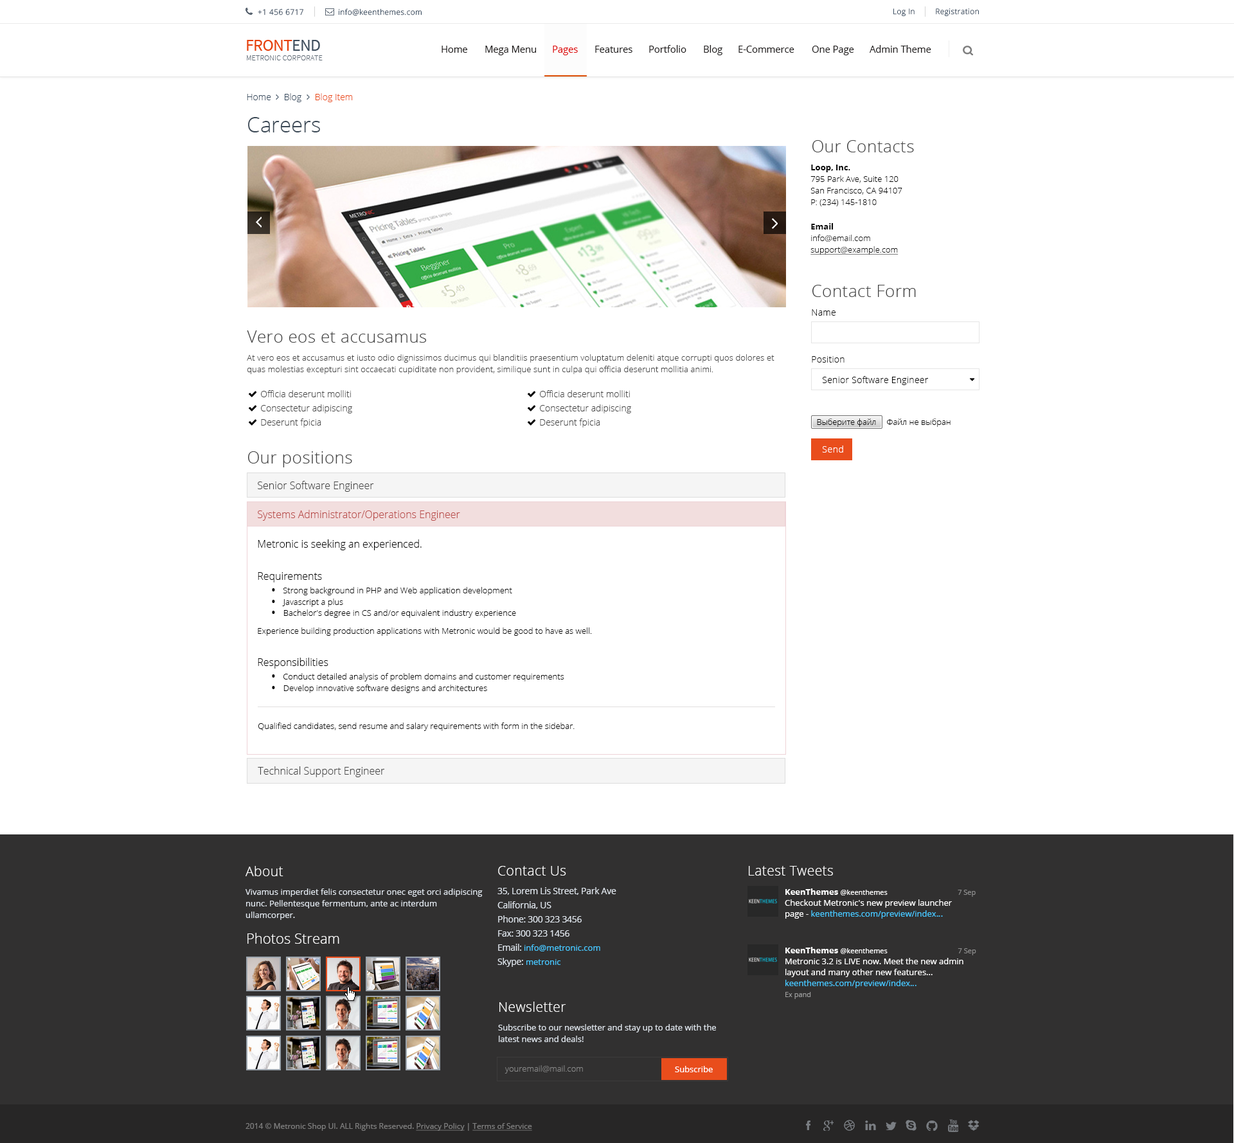
<style>
.page{position:relative;width:1234px;height:1143px;background:#ffffff}
.page>*{position:absolute;margin:0}
.t1{font:7.7px "OpenSans-Light";letter-spacing:0.04em;color:#394c60}
.t2{font:9.4px "OpenSans";color:#1f1c1c}
.t3{font:9.4px "OpenSans";color:#dd0000}
.t4{font:9px "OpenSans-Light";color:#394c60}
.t5{font:9px "OpenSans-Light";color:#e94d1c}
.t6{font:21.2px "OpenSans-Light";color:#3a4855}
.t7{font:16.7px "OpenSans-Light";letter-spacing:0.02em;color:#444444}
.t8{font:8.4px/11.6px "OpenSans-Light";color:#000000}
.t9{font:8.4px/11.6px "OpenSans-Bold";color:#000000}
.t10{font:8.4px/11.6px "OpenSans-Light";color:#0f0f0f;text-decoration:underline}
.t11{font:8.4px/11.6px "OpenSans-Bold";color:#0f0f0f}
.t12{font:8.4px/11.6px "OpenSans-Light";color:#0f0f0f}
.t13{font:9px "OpenSans-Light";letter-spacing:0.02em;color:#000000}
.t14{font:8.4px/11.6px "OpenSans-Light";letter-spacing:0.01em;color:#444444}
.t15{font:9px/14.1px "OpenSans-Light";color:#444444}
.t16{font:8.4px "OpenSans-Light";letter-spacing:-0.01em;color:#000000}
.t17{font:8.4px "OpenSans-Light";color:#000000}
.t18{font:9px "OpenSans-Light";letter-spacing:0.04em;color:#ffffff}
.t19{font:10.3px "OpenSans-Light";color:#444444}
.t20{font:10.3px "OpenSans-Light";color:#b94a48}
.t21{font:8.4px/7.5px "OpenSans-Light";color:#000000}
.t22{font:10.3px "OpenSans-Light";color:#000000}
.t23{font:10.3px/15.4px "OpenSans-Light";color:#000000}
.t24{font:16.7px/3.7px "OpenSans-Light";color:#000000}
.t25{font:8.4px/2.4px "OpenSans-Light";color:#000000}
.t26{font:16.7px/7.7px "OpenSans-Light";color:#000000}
.t27{font:8.4px/11.4px "OpenSans-Light";color:#000000}
.t28{font:16.7px/6.4px "OpenSans-Light";color:#000000}
.t29{font:10.3px/16.2px "OpenSans-Light";color:#000000}
.t30{font:16.7px/3.9px "OpenSans-Light";color:#000000}
.t31{font:8.4px/8.7px "OpenSans-Light";color:#000000}
.t32{font:13.5px "OpenSans-Light";letter-spacing:0.02em;color:#fefefe}
.t33{font:13.5px "OpenSans-Light";letter-spacing:0.02em;color:#ffffff}
.t34{font:8.4px/11.6px "OpenSans";color:#dee4eb}
.t35{font:9px/14.1px "OpenSans";letter-spacing:-0.02em;color:#dee4eb}
.t36{font:8.4px/10.9px "OpenSans";color:#47c7ff}
.t37{font:8.4px/10.9px "OpenSans";color:#ffffff}
.t38{font:8.4px/10.9px "OpenSans-Bold";color:#ffffff}
.t39{font:7.1px/10.9px "OpenSans";color:#ffffff}
.t40{font:7.1px/10.9px "OpenSans";color:#8d8d8d}
.t41{font:14.1px "OpenSans-Light";color:#fefefe}
.t42{font:7.1px/10.9px "OpenSans";color:#999999}
.t43{font:8.4px "OpenSans-Light";color:#858585}
.t44{font:8.4px "OpenSans";color:#ffffff}
.t45{font:7.7px "OpenSans";color:#7f7f7f}
.t46{font:7.7px "OpenSans";color:#7f7f7f;text-decoration:underline}
</style>
<div class="page">
<p class="t1" style="left:258px;top:8px;width:164px;height:8px">+1 456 6717                info@keenthemes.com</p>
<p class="t1" style="left:894px;top:8px;width:85px;height:9px">Log In        Registration</p>
<p class="t2" style="left:442px;top:46px;width:25px;height:7px">Home</p>
<p class="t2" style="left:485px;top:46px;width:51px;height:9px">Mega Menu</p>
<p class="t3" style="left:553px;top:46px;width:25px;height:9px">Pages</p>
<p class="t2" style="left:595px;top:46px;width:38px;height:7px">Features</p>
<p class="t2" style="left:649px;top:45px;width:38px;height:8px">Portfolio</p>
<p class="t2" style="left:704px;top:45px;width:19px;height:10px">Blog</p>
<p class="t2" style="left:739px;top:46px;width:56px;height:7px">E-Commerce</p>
<p class="t2" style="left:812px;top:46px;width:42px;height:9px">One Page</p>
<p class="t2" style="left:870px;top:45px;width:62px;height:8px">Admin Theme</p>
<p class="t4" style="left:247px;top:93px;width:106px;height:9px">Home     Blog      <span class="t5">Blog Item</span></p>
<p class="t6" style="left:248px;top:117px;width:72px;height:15px">Careers</p>
<p class="t7" style="left:813px;top:140px;width:101px;height:12px">Our Contacts</p>
<p class="t8" style="left:811px;top:165px;width:92px;height:41px"><span class="t9">Loop, Inc.<br></span>795 Park Ave, Suite 120<br>San Francisco, CA 94107<br>P: (234) 145-1810</p>
<p class="t10" style="left:811px;top:223px;width:88px;height:32px"><span class="t11">Email<br></span><span class="t12">info@email.com<br></span>support@example.com</p>
<p class="t7" style="left:813px;top:285px;width:103px;height:12px">Contact Form</p>
<p class="t13" style="left:812px;top:309px;width:24px;height:7px">Name</p>
<p class="t7" style="left:247px;top:330px;width:179px;height:13px">Vero eos et accusamus</p>
<p class="t14" style="left:247px;top:354px;width:528px;height:20px">At vero eos et accusamus et iusto odio dignissimos ducimus qui blanditiis praesentium voluptatum deleniti atque corrupti quos dolores et quas molestias excepturi sint occaecati cupiditate non provident, similique sunt in culpa qui officia deserunt mollitia animi.</p>
<p class="t13" style="left:812px;top:356px;width:33px;height:7px">Position</p>
<p class="t13" style="left:822px;top:376px;width:106px;height:9px">Senior Software Engineer</p>
<p class="t15" style="left:261px;top:390px;width:91px;height:38px">Officia deserunt molliti<br>Consectetur adipiscing<br>Deserunt fpicia</p>
<p class="t15" style="left:540px;top:390px;width:91px;height:38px">Officia deserunt molliti<br>Consectetur adipiscing<br>Deserunt fpicia</p>
<p class="t16" style="left:817px;top:419px;width:59px;height:8px">Выберите файл</p>
<p class="t17" style="left:887px;top:419px;width:64px;height:8px">Файл не выбран</p>
<p class="t18" style="left:822px;top:446px;width:21px;height:7px">Send</p>
<p class="t7" style="left:248px;top:451px;width:104px;height:16px">Our positions</p>
<p class="t19" style="left:258px;top:481px;width:116px;height:11px">Senior Software Engineer</p>
<p class="t20" style="left:258px;top:510px;width:202px;height:11px">Systems Administrator/Operations Engineer</p>
<p class="t21" style="left:258px;top:539px;width:334px;height:154px"><span class="t22">Metronic is seeking an experienced.<br><br></span><span class="t23">Requirements<br><br>      </span><span class="t24">•  </span><span class="t25">Strong background in PHP and Web application development<br>      </span><span class="t26">•  </span><span class="t27">Javascript a plus<br>      </span><span class="t28">•  </span><span class="t27">Bachelor's degree in CS and/or equivalent industry experience<br><br></span>Experience building production applications with Metronic would be good to have as well.<br><br><span class="t29">Responsibilities<br><br>      </span><span class="t30">•  </span>Conduct deta<span class="t31">iled analysis of problem domains and customer requirements<br>      </span><span class="t26">•  </span><span class="t27">Develop innovative software designs and architectures</span></p>
<p class="t17" style="left:258px;top:723px;width:317px;height:8px">Qualified candidates, send resume and salary requirements with form in the sidebar.</p>
<p class="t19" style="left:258px;top:766px;width:126px;height:11px">Technical Support Engineer</p>
<p class="t32" style="left:246px;top:866px;width:38px;height:10px">About</p>
<p class="t33" style="left:498px;top:866px;width:68px;height:10px">Contact Us</p>
<p class="t33" style="left:749px;top:866px;width:84px;height:10px">Latest Tweets</p>
<p class="t34" style="left:246px;top:888px;width:237px;height:32px">Vivamus imperdiet felis consectetur onec eget orci adipiscing nunc. Pellentesque fermentum, ante ac interdum ullamcorper.</p>
<p class="t35" style="left:498px;top:887px;width:118px;height:80px">35, Lorem Lis Street, Park Ave<br>California, US<br>Phone: 300 323 3456<br>Fax: 300 323 1456<br>Email: <span class="t36">info@metronic.com<br></span>Skype: <span class="t36">metronic</span></p>
<p class="t37" style="left:785px;top:888px;width:191px;height:31px"><span class="t38">KeenThemes </span><span class="t39">@keenthemes         </span><span class="t40">7 Sep<br></span>Checkout Metronic's new preview launcher <br>page - <span class="t36">keenthemes.com/preview/index…</span></p>
<p class="t41" style="left:248px;top:933px;width:91px;height:11px">Photos Stream</p>
<p class="t37" style="left:786px;top:947px;width:191px;height:52px"><span class="t38">KeenThemes </span><span class="t39">@keenthemes           </span><span class="t40">7 Sep<br></span>Metronic 3.2 is LIVE now. Meet the new admin layout and many other new features... <span class="t36">keenthemes.com/preview/index…<br></span><span class="t42">Ex pand</span></p>
<p class="t33" style="left:500px;top:1002px;width:66px;height:10px">Newsletter</p>
<p class="t34" style="left:498px;top:1024px;width:218px;height:18px">Subscribe to our newsletter and stay up to date with the latest news and deals!</p>
<p class="t43" style="left:505px;top:1065px;width:78px;height:9px">youremail@mail.com</p>
<p class="t44" style="left:675px;top:1066px;width:38px;height:6px">Subscribe</p>
<p class="t45" style="left:246px;top:1123px;width:286px;height:8px">2014 © Metronic Shop UI. ALL Rights Reserved. <span class="t46">Privacy Policy</span> | <span class="t46">Terms of Service</span></p>
</div>
